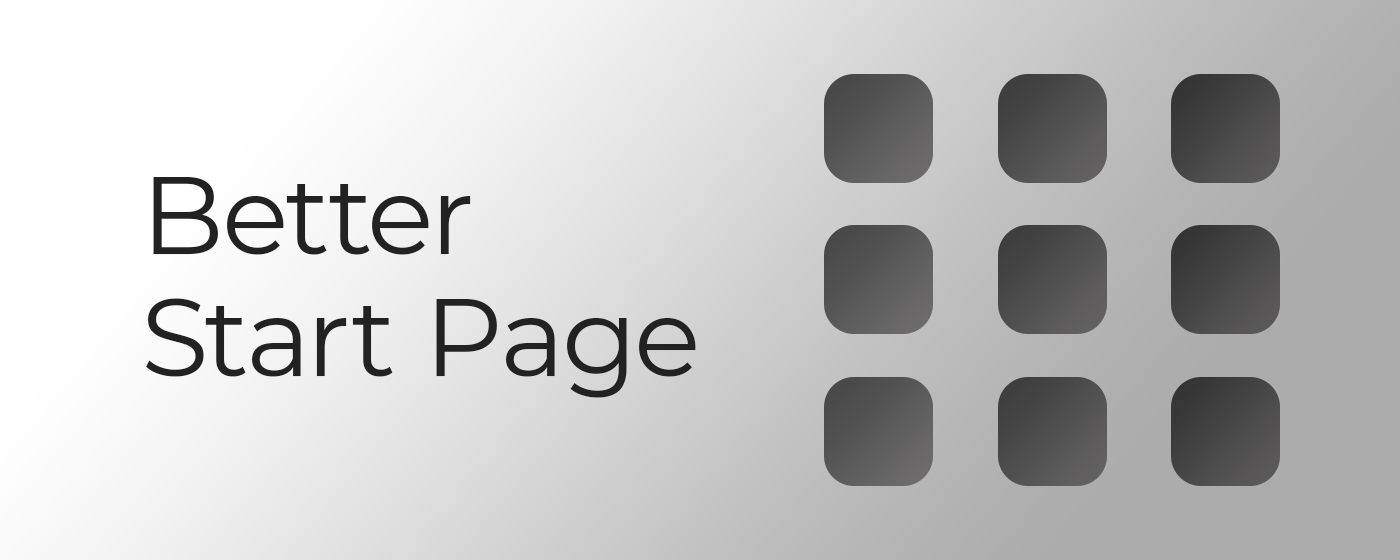
<style>
.page{position:relative;width:1400px;height:560px}
.page>*{position:absolute;margin:0}
.t1{font:110px/122.4px "Montserrat-Regular";color:#222222}
</style>
<div class="page">
<p class="t1" style="left:146px;top:177px;width:550px;height:221px">Better<br>Start Page</p>
</div>
